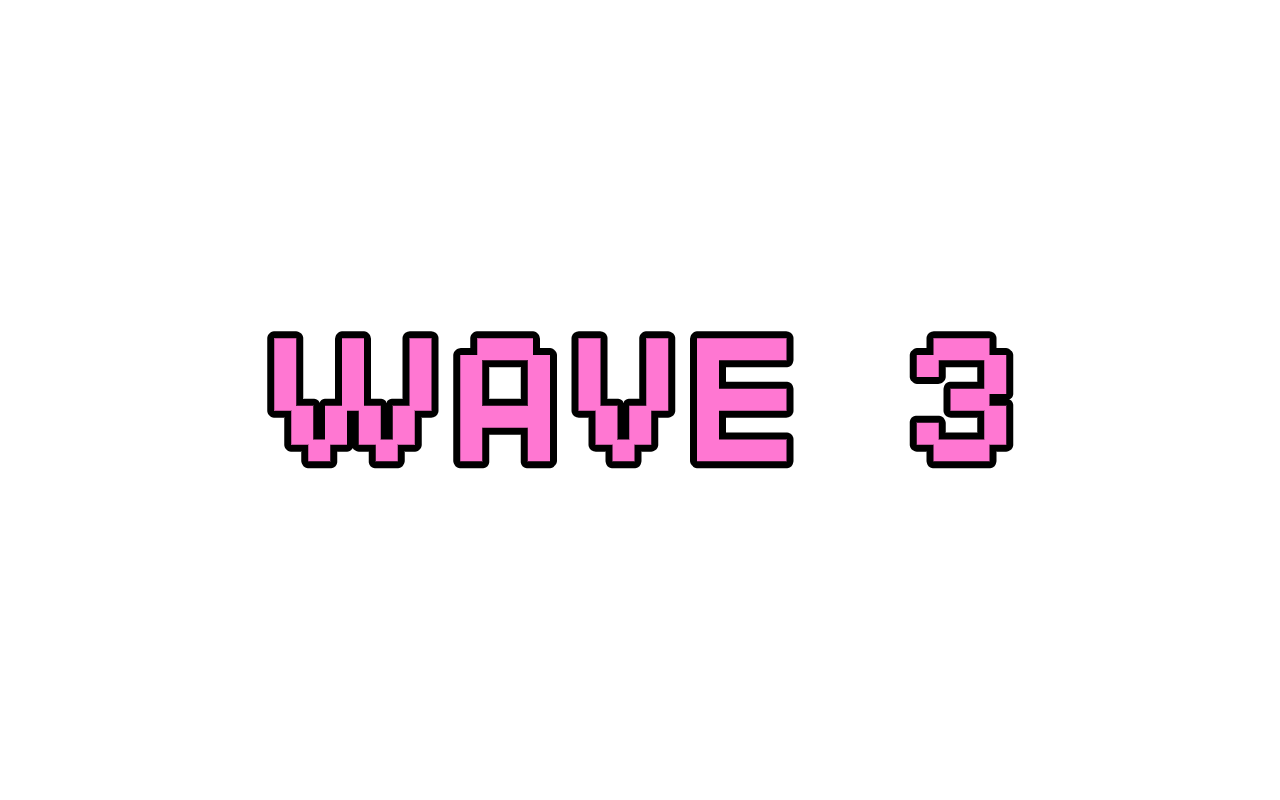
<style>
.page{position:relative;width:1280px;height:800px;background:#ffffff}
.page>*{position:absolute;margin:0}
.t1{font:169px "SFPixelate-Bold";color:#ff77d2}
</style>
<div class="page">
<p class="t1" style="left:274px;top:338px;width:733px;height:124px">WAVE 3</p>
</div>
